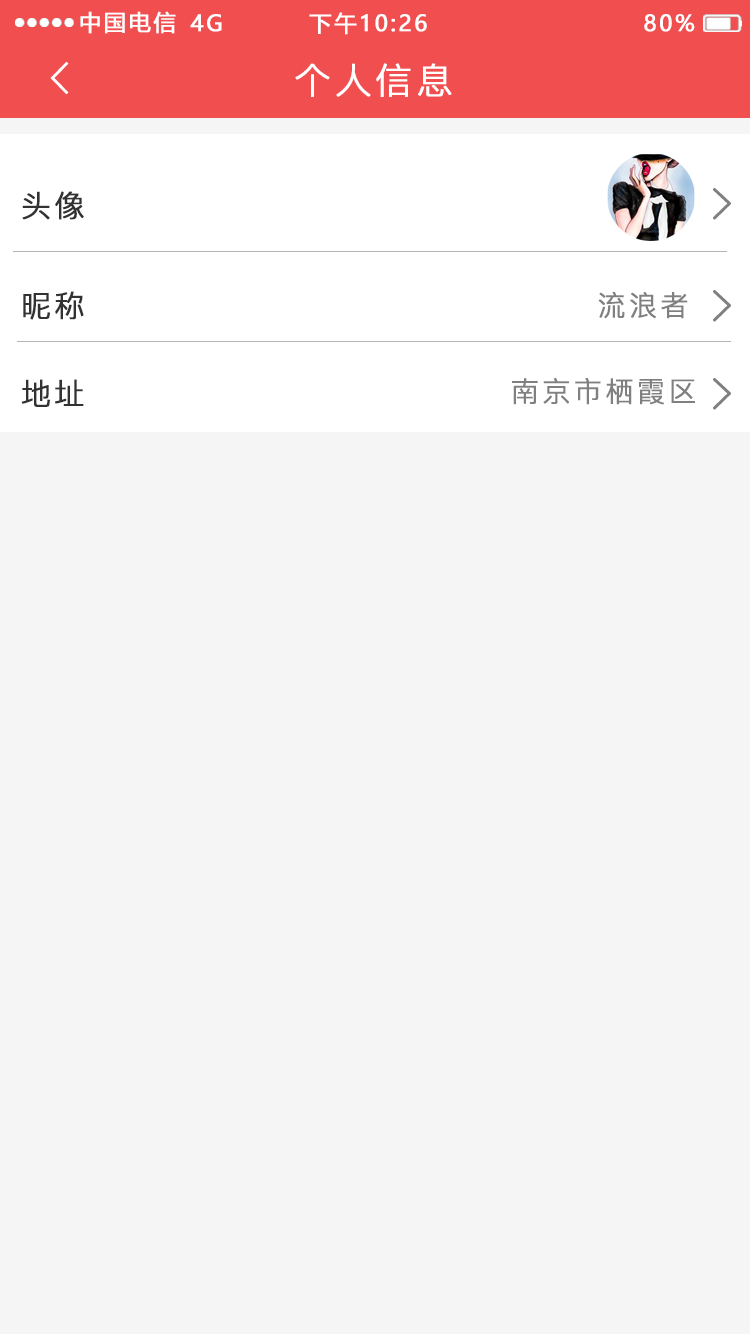
<style>
.page{position:relative;width:750px;height:1334px;background:#f5f5f5}
.page>*{position:absolute;margin:0}
.t1{font:22px "MicrosoftYaHei";letter-spacing:0.1em;color:#ffffff;text-transform:uppercase;font-weight:bold}
.t2{font:36px "PingFang-SC-Regular";letter-spacing:0.1em;color:#ffffff;text-transform:uppercase;font-weight:bold}
.t3{font:30px "PingFang-SC-Regular";letter-spacing:0.1em;color:#323233;text-transform:uppercase;font-weight:bold}
.t4{font:28px "PingFang-SC-Regular";letter-spacing:0.1em;color:#808080;text-transform:uppercase;font-weight:bold}
</style>
<div class="page">
<p class="t1" style="left:80px;top:11px;width:96px;height:23px">中国电信</p>
<p class="t1" style="left:190px;top:14px;width:32px;height:18px">4G</p>
<p class="t1" style="left:309px;top:12px;width:118px;height:23px">下午10:26</p>
<p class="t1" style="left:644px;top:14px;width:51px;height:18px">80%</p>
<p class="t2" style="left:295px;top:63px;width:157px;height:34px">个人信息</p>
<p class="t3" style="left:22px;top:191px;width:62px;height:29px">头像</p>
<p class="t3" style="left:23px;top:291px;width:61px;height:29px">昵称</p>
<p class="t4" style="left:598px;top:292px;width:90px;height:27px">流浪者</p>
<p class="t3" style="left:21px;top:379px;width:63px;height:28px">地址</p>
<p class="t4" style="left:512px;top:378px;width:183px;height:27px">南京市栖霞区</p>
</div>
